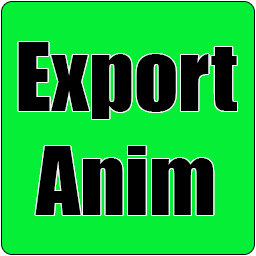
<style>
.page{position:relative;width:256px;height:256px;background:#05ef37}
.page>*{position:absolute;margin:0}
.t1{font:86.7px "Impact";color:#000000}
</style>
<div class="page">
<p class="t1" style="left:18px;top:42px;width:219px;height:173px;text-align:center">Export<br>Anim</p>
</div>
